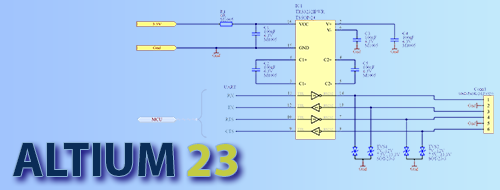
<style>
.page{position:relative;width:500px;height:190px}
.page>*{position:absolute;margin:0}
.t1{font:48px "MyriadPro-Bold";color:#0a2c57}
.t2{font:48px "MyriadPro-Bold";color:#c3cb42}
</style>
<div class="page">
<p class="t1" style="left:13px;top:143px;width:224px;height:33px">ALTIUM <span class="t2">23</span></p>
</div>
